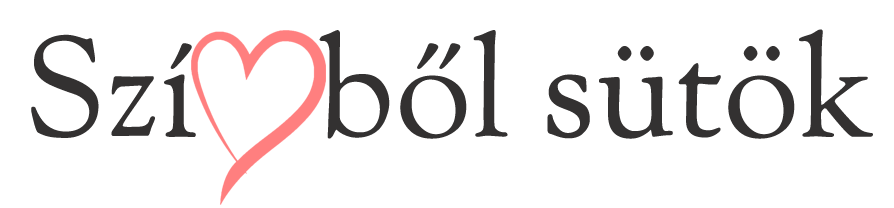
<style>
.page{position:relative;width:894px;height:208px;background:#ffffff}
.page>*{position:absolute;margin:0}
.t1{font:140px "SortsMillGoudy-Regular";color:#333131}
</style>
<div class="page">
<p class="t1" style="left:31px;top:29px;width:842px;height:110px">Szí    ből sütök</p>
</div>
